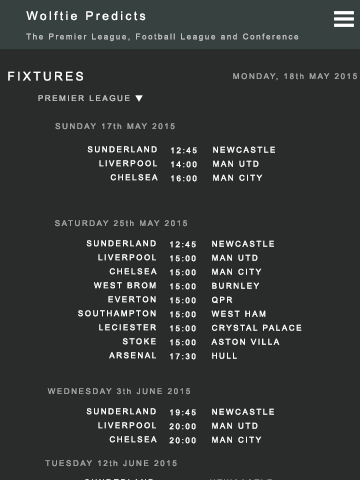
<style>
.page{position:relative;width:360px;height:480px;background:#2a2c2b}
.page>*{position:absolute;margin:0}
.t1{font:12px "ArialMT";letter-spacing:0.2em;color:#ffffff}
.t2{font:8px "ArialMT";letter-spacing:0.2em;color:#c2c2c2}
.t3{font:8px "ArialMT";letter-spacing:0.2em;color:#a5a5a5}
.t4{font:8px/14px "ArialMT";letter-spacing:0.2em;color:#ffffff}
</style>
<div class="page">
<p class="t1" style="left:26px;top:11px;width:120px;height:10px">Wolftie Predicts</p>
<p class="t2" style="left:26px;top:33px;width:273px;height:9px">The Premier League, Football League and Conference</p>
<p class="t1" style="left:8px;top:71px;width:75px;height:10px">FIXTURES</p>
<p class="t3" style="left:233px;top:73px;width:124px;height:8px">MONDAY, 18th MAY 2015</p>
<p class="t2" style="left:38px;top:95px;width:92px;height:7px">PREMIER LEAGUE</p>
<p class="t3" style="left:55px;top:123px;width:120px;height:7px">SUNDAY 17th MAY 2015</p>
<p class="t4" style="left:87px;top:146px;width:71px;height:35px;text-align:right">SUNDERLAND<br>LIVERPOOL<br>CHELSEA</p>
<p class="t4" style="left:171px;top:147px;width:26px;height:35px;text-align:center">12:45 <br>14:00<br>16:00</p>
<p class="t4" style="left:213px;top:146px;width:62px;height:35px">NEWCASTLE<br>MAN UTD<br>MAN CITY</p>
<p class="t3" style="left:55px;top:220px;width:132px;height:7px">SATURDAY 25th MAY 2015</p>
<p class="t4" style="left:78px;top:240px;width:79px;height:119px;text-align:right">SUNDERLAND<br>LIVERPOOL<br>CHELSEA<br>WEST BROM<br>EVERTON<br>SOUTHAMPTON<br>LECIESTER<br>STOKE<br>ARSENAL</p>
<p class="t4" style="left:170px;top:241px;width:26px;height:119px;text-align:center">12:45<br>15:00<br>15:00<br>15:00<br>15:00<br>15:00<br>15:00<br>15:00<br>17:30</p>
<p class="t4" style="left:211px;top:240px;width:91px;height:119px">NEWCASTLE<br>MAN UTD<br>MAN CITY<br>BURNLEY<br>QPR<br>WEST HAM<br>CRYSTAL PALACE<br>ASTON VILLA<br>HULL</p>
<p class="t3" style="left:47px;top:388px;width:143px;height:7px">WEDNESDAY 3th JUNE 2015</p>
<p class="t4" style="left:86px;top:408px;width:71px;height:35px;text-align:right">SUNDERLAND<br>LIVERPOOL<br>CHELSEA</p>
<p class="t4" style="left:169px;top:409px;width:27px;height:35px;text-align:center">19:45<br>20:00<br>20:00</p>
<p class="t4" style="left:212px;top:408px;width:62px;height:35px">NEWCASTLE<br>MAN UTD<br>MAN CITY</p>
<p class="t3" style="left:45px;top:460px;width:132px;height:7px">TUESDAY 12th JUNE 2015</p>
</div>
